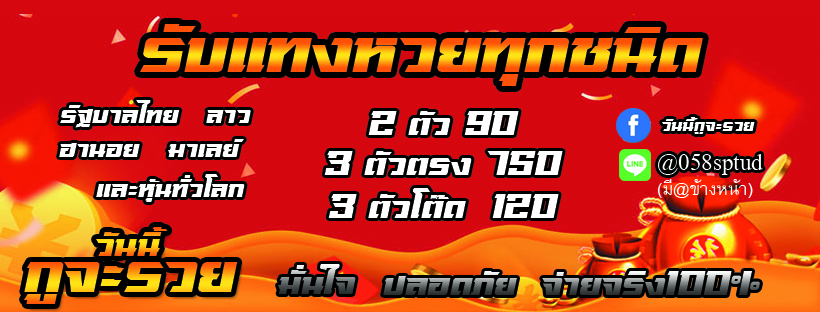
<style>
.page{position:relative;width:820px;height:312px}
.page>*{position:absolute;margin:0}
.t1{font:80px "sdrangverV.1-Regular"}
.t2{font:30px "sdrangverV.1-Regular";color:#ffffff}
.t3{font:40px "sdrangverV.1-Regular";color:#ffffff}
.t4{font:20px "sdrangverV.1-Regular";color:#ffffff}
.t5{font:35px "AngsanaNew";color:#ffffff}
.t6{font:25px "BrowalliaNew";color:#ffffff}
.t7{font:40px "sdrangverV.1-Regular"}
.t8{font:70px "sdrangverV.1-Regular"}
</style>
<div class="page">
<p class="t1" style="left:140px;top:24px;width:563px;height:62px">รับแทงหวยทุกชนิด</p>
<p class="t2" style="left:60px;top:100px;width:120px;height:28px">รัฐบาลไทย</p>
<p class="t2" style="left:206px;top:110px;width:45px;height:13px">ลาว</p>
<p class="t3" style="left:368px;top:111px;width:151px;height:24px">2 ตัว 90</p>
<p class="t4" style="left:662px;top:117px;width:93px;height:17px">วันนี้กูจะรวย</p>
<p class="t2" style="left:59px;top:143px;width:81px;height:14px">ฮานอย</p>
<p class="t2" style="left:168px;top:139px;width:76px;height:18px">มาเลย์</p>
<p class="t3" style="left:324px;top:151px;width:239px;height:24px">3 ตัวตรง 750</p>
<p class="t5" style="left:658px;top:154px;width:105px;height:21px">@058sptud</p>
<p class="t2" style="left:96px;top:174px;width:149px;height:28px">และหุ้นทั่วโลก</p>
<p class="t6" style="left:657px;top:179px;width:96px;height:19px">(มี@ข้างหน้า)</p>
<p class="t3" style="left:328px;top:188px;width:231px;height:30px">3 ตัวโต๊ด  120</p>
<p class="t7" style="left:96px;top:227px;width:72px;height:29px">วันนี้</p>
<p class="t8" style="left:24px;top:262px;width:214px;height:42px">กูจะรวย</p>
<p class="t7" style="left:278px;top:264px;width:78px;height:30px">มั่นใจ</p>
<p class="t7" style="left:383px;top:271px;width:134px;height:24px">ปลอดภัย</p>
<p class="t7" style="left:542px;top:271px;width:218px;height:24px">จ่ายจริง100%</p>
</div>
